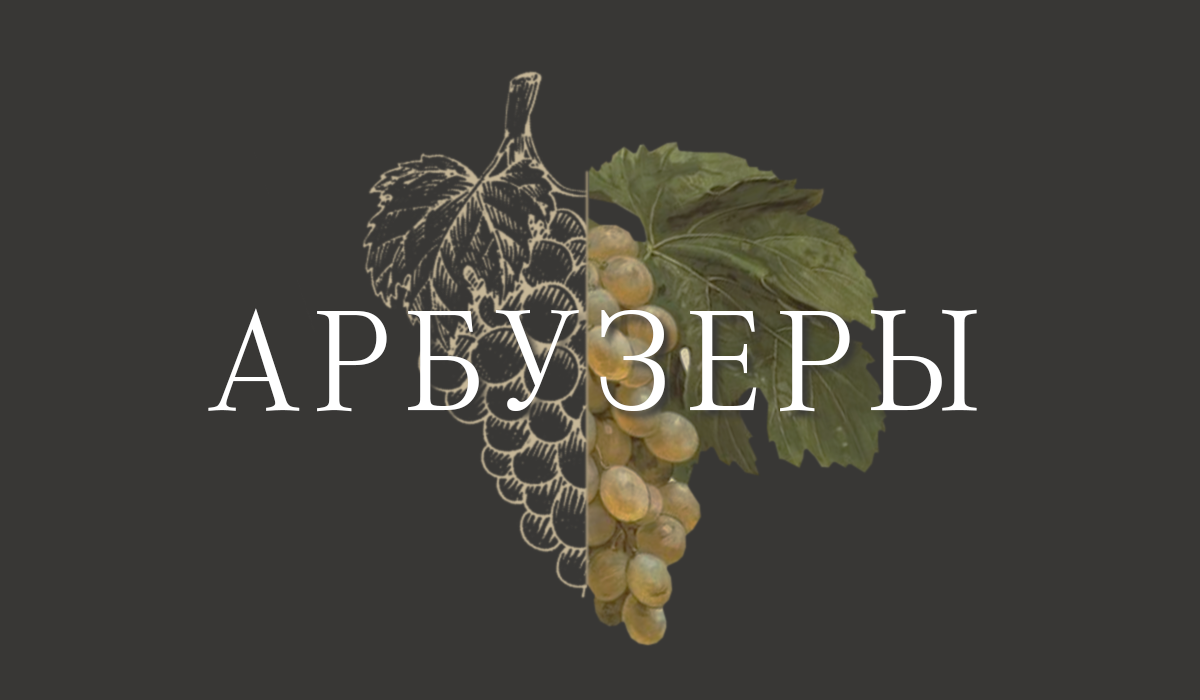
<style>
.page{position:relative;width:1200px;height:700px;background:#383735}
.page>*{position:absolute;margin:0}
.t1{font:148.9px "CorporateAPro-Light";letter-spacing:0.08em;color:#ffffff}
</style>
<div class="page">
<p class="t1" style="left:208px;top:308px;width:769px;height:104px">АРБУЗЕРЫ</p>
</div>
